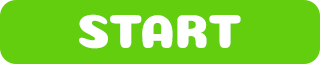
<style>
.page{position:relative;width:320px;height:64px;background:#63ce0d}
.page>*{position:absolute;margin:0}
.t1{font:48px "Coiny-Regular";color:#ffffff}
</style>
<div class="page">
<p class="t1" style="left:79px;top:14px;width:162px;height:35px">START</p>
</div>
